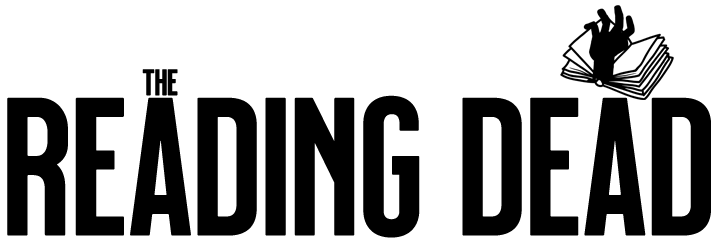
<style>
.page{position:relative;width:721px;height:243px;background:#ffffff}
.page>*{position:absolute;margin:0}
.t1{font:36.5px "Milkstore02-Clean";letter-spacing:-0.05em;color:#000000;font-weight:bold}
.t2{font:195.9px "Milkstore02-Clean";letter-spacing:-0.05em;color:#000000;font-weight:bold}
</style>
<div class="page">
<p class="t1" style="left:142px;top:69px;width:36px;height:27px">THE</p>
<p class="t2" style="left:7px;top:95px;width:704px;height:143px">READING DEAD</p>
</div>
